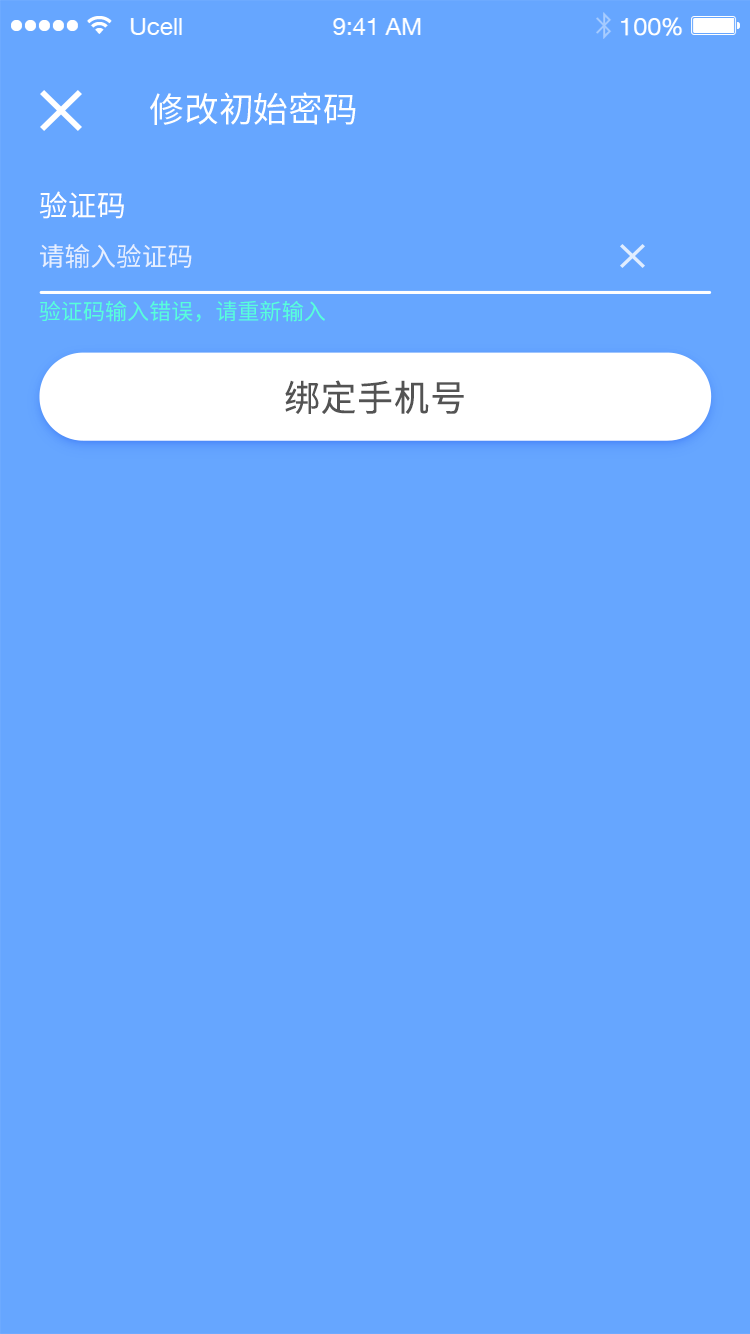
<style>
.page{position:relative;width:750px;height:1334px;background:#66a6ff}
.page>*{position:absolute;margin:0}
.t1{font:34.9px "NotoSansHans-Regular";color:#ffffff}
.t2{font:29.3px "NotoSansHans-Regular";color:#ffffff;text-transform:uppercase}
.t3{font:26px "NotoSansHans-Regular";color:#e6efff;text-transform:uppercase}
.t4{font:22.2px "NotoSansHans-Regular";color:#57ffda;text-transform:uppercase}
.t5{font:36.1px "NotoSansHans-Regular";letter-spacing:0.02em;color:#535353}
</style>
<div class="page">
<p class="t1" style="left:150px;top:92px;width:206px;height:33px">修改初始密码</p>
<p class="t2" style="left:39px;top:191px;width:85px;height:28px">验证码</p>
<p class="t3" style="left:40px;top:244px;width:152px;height:25px">请输入验证码</p>
<p class="t4" style="left:39px;top:300px;width:286px;height:22px">验证码输入错误，请重新输入</p>
<p class="t5" style="left:285px;top:380px;width:179px;height:34px">绑定手机号</p>
</div>
